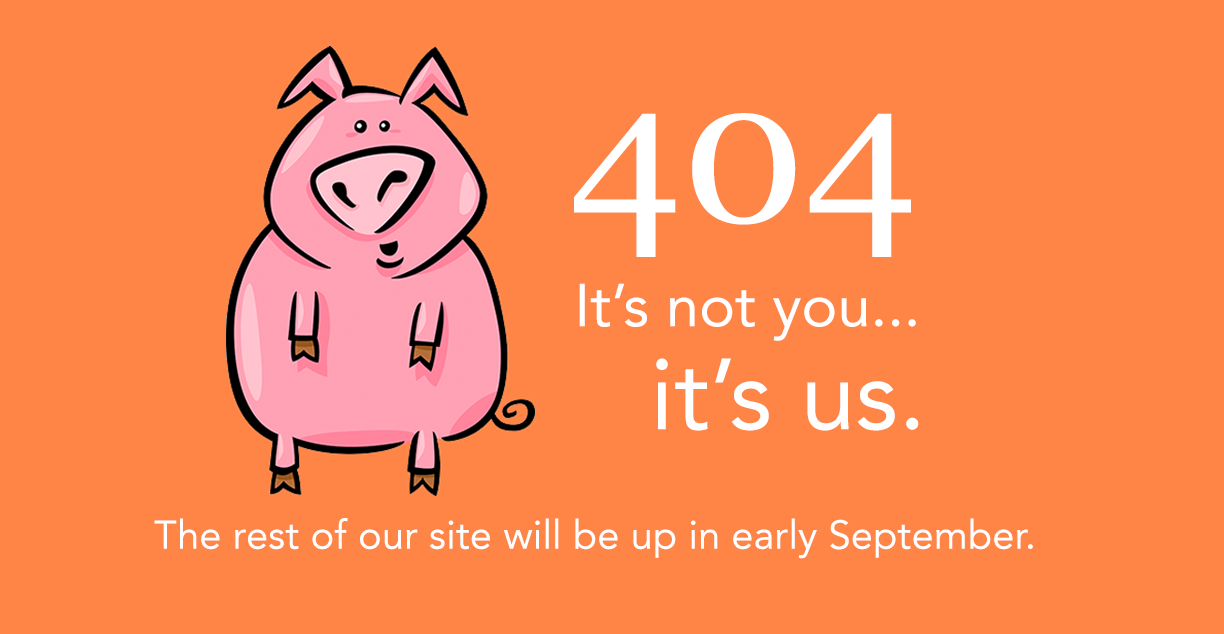
<style>
.page{position:relative;width:1224px;height:634px;background:#ff8547}
.page>*{position:absolute;margin:0}
.t1{font:200px "Georgia";color:#ffffff}
.t2{font:60px "Avenir-Roman";color:#ffffff}
.t3{font:99.9px "Avenir-Roman";color:#ffffff}
.t4{font:40px "Avenir-Roman";color:#ffffff}
</style>
<div class="page">
<p class="t1" style="left:574px;top:113px;width:337px;height:144px">404</p>
<p class="t2" style="left:579px;top:283px;width:337px;height:58px">It’s not you...</p>
<p class="t3" style="left:656px;top:358px;width:263px;height:73px">it’s us.</p>
<p class="t4" style="left:154px;top:518px;width:879px;height:41px">The rest of our site will be up in early September.</p>
</div>
